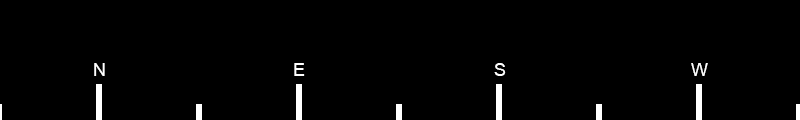
<style>
.page{position:relative;width:800px;height:120px;background:#000000}
.page>*{position:absolute;margin:0}
.t1{font:18px "ArialMT";letter-spacing:0.18em;color:#ffffff}
</style>
<div class="page">
<p class="t1" style="left:94px;top:63px;width:11px;height:13px">N</p>
<p class="t1" style="left:294px;top:63px;width:11px;height:13px">E</p>
<p class="t1" style="left:494px;top:63px;width:12px;height:13px">S</p>
<p class="t1" style="left:691px;top:63px;width:17px;height:13px">W</p>
</div>
